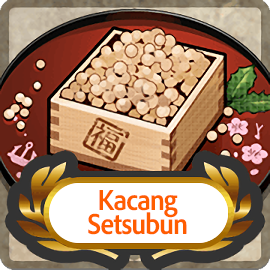
<style>
.page{position:relative;width:270px;height:270px}
.page>*{position:absolute;margin:0}
.t1{font:30px/24px "AdobeClean-Bold";letter-spacing:-0.04em;color:#ff5d00;scale:0.9 1}
</style>
<div class="page">
<p class="t1" style="left:88px;top:190px;width:99px;height:45px;text-align:center">Kacang<br>Setsubun</p>
</div>
